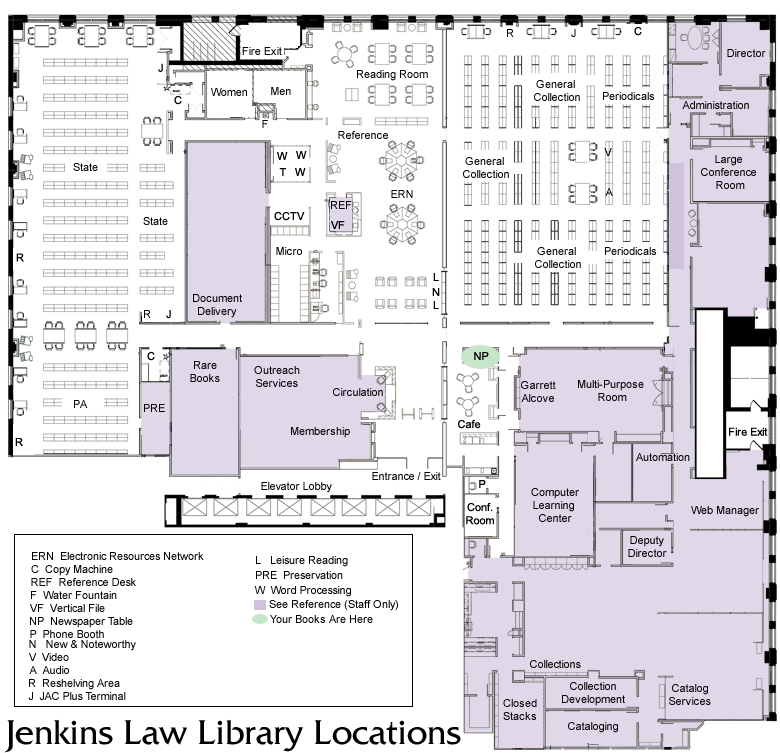
<style>
.page{position:relative;width:780px;height:753px;background:#ffffff}
.page>*{position:absolute;margin:0}
.t1{font:11px "ArialMT";color:#000000}
.t2{font:36px "FrizQuadrata";color:#000000}
</style>
<div class="page">
<p class="t1" style="left:507px;top:29px;width:7px;height:8px">R</p>
<p class="t1" style="left:571px;top:29px;width:5px;height:8px">J</p>
<p class="t1" style="left:634px;top:26px;width:8px;height:10px">C</p>
<p class="t1" style="left:242px;top:47px;width:40px;height:8px">Fire Exit</p>
<p class="t1" style="left:727px;top:49px;width:39px;height:8px">Director</p>
<p class="t1" style="left:158px;top:63px;width:5px;height:9px">J</p>
<p class="t1" style="left:357px;top:70px;width:71px;height:11px">Reading Room</p>
<p class="t1" style="left:211px;top:88px;width:36px;height:8px">Women</p>
<p class="t1" style="left:271px;top:87px;width:20px;height:8px">Men</p>
<p class="t1" style="left:534px;top:80px;width:46px;height:21px;text-align:center">General <br>Collection</p>
<p class="t1" style="left:174px;top:95px;width:8px;height:10px">C</p>
<p class="t1" style="left:603px;top:92px;width:51px;height:8px">Periodicals</p>
<p class="t1" style="left:682px;top:101px;width:67px;height:8px">Administration</p>
<p class="t1" style="left:262px;top:120px;width:6px;height:8px">F</p>
<p class="t1" style="left:338px;top:131px;width:50px;height:8px">Reference</p>
<p class="t1" style="left:604px;top:148px;width:8px;height:8px">V</p>
<p class="t1" style="left:277px;top:152px;width:11px;height:8px">W</p>
<p class="t1" style="left:296px;top:151px;width:11px;height:8px">W</p>
<p class="t1" style="left:463px;top:157px;width:46px;height:21px;text-align:center">General <br>Collection</p>
<p class="t1" style="left:701px;top:155px;width:55px;height:34px;text-align:center">Large <br>Conference <br>Room</p>
<p class="t1" style="left:73px;top:163px;width:25px;height:8px">State</p>
<p class="t1" style="left:279px;top:168px;width:7px;height:8px">T</p>
<p class="t1" style="left:295px;top:168px;width:11px;height:8px">W</p>
<p class="t1" style="left:391px;top:190px;width:22px;height:8px">ERN</p>
<p class="t1" style="left:605px;top:188px;width:8px;height:8px">A</p>
<p class="t1" style="left:331px;top:201px;width:21px;height:8px">REF</p>
<p class="t1" style="left:143px;top:217px;width:25px;height:8px">State</p>
<p class="t1" style="left:274px;top:211px;width:31px;height:10px">CCTV</p>
<p class="t1" style="left:331px;top:221px;width:14px;height:8px">VF</p>
<p class="t1" style="left:16px;top:253px;width:8px;height:9px">R</p>
<p class="t1" style="left:276px;top:247px;width:26px;height:8px">Micro</p>
<p class="t1" style="left:535px;top:247px;width:46px;height:21px;text-align:center">General <br>Collection</p>
<p class="t1" style="left:605px;top:247px;width:51px;height:8px">Periodicals</p>
<p class="t1" style="left:433px;top:273px;width:6px;height:8px">L</p>
<p class="t1" style="left:193px;top:294px;width:49px;height:24px;text-align:center">Document<br>Delivery</p>
<p class="t1" style="left:432px;top:288px;width:8px;height:8px">N</p>
<p class="t1" style="left:433px;top:301px;width:6px;height:8px">L</p>
<p class="t1" style="left:144px;top:310px;width:7px;height:8px">R</p>
<p class="t1" style="left:166px;top:310px;width:5px;height:9px">J</p>
<p class="t1" style="left:147px;top:351px;width:8px;height:10px">C</p>
<p class="t1" style="left:474px;top:352px;width:15px;height:8px">NP</p>
<p class="t1" style="left:190px;top:361px;width:30px;height:21px;text-align:center">Rare<br>Books</p>
<p class="t1" style="left:254px;top:366px;width:46px;height:21px;text-align:center">Outreach<br>Services</p>
<p class="t1" style="left:333px;top:388px;width:50px;height:8px">Circulation</p>
<p class="t1" style="left:521px;top:381px;width:35px;height:21px;text-align:center">Garrett<br>Alcove</p>
<p class="t1" style="left:578px;top:380px;width:66px;height:21px;text-align:center">Multi-Purpose <br>Room</p>
<p class="t1" style="left:74px;top:400px;width:14px;height:8px">PA</p>
<p class="t1" style="left:144px;top:404px;width:21px;height:8px">PRE</p>
<p class="t1" style="left:458px;top:419px;width:23px;height:10px">Cafe</p>
<p class="t1" style="left:15px;top:438px;width:8px;height:8px">R</p>
<p class="t1" style="left:291px;top:427px;width:59px;height:11px">Membership</p>
<p class="t1" style="left:729px;top:427px;width:39px;height:9px">Fire Exit</p>
<p class="t1" style="left:636px;top:453px;width:54px;height:8px">Automation</p>
<p class="t1" style="left:372px;top:472px;width:69px;height:8px">Entrance / Exit</p>
<p class="t1" style="left:261px;top:482px;width:71px;height:11px">Elevator Lobby</p>
<p class="t1" style="left:479px;top:480px;width:7px;height:8px">P</p>
<p class="t1" style="left:531px;top:488px;width:48px;height:34px;text-align:center">Computer<br>Learning <br>Center</p>
<p class="t1" style="left:466px;top:502px;width:28px;height:23px;text-align:center">Conf.<br>Room</p>
<p class="t1" style="left:691px;top:506px;width:68px;height:11px">Web Manager</p>
<p class="t1" style="left:628px;top:536px;width:39px;height:21px;text-align:center">Deputy<br>Director</p>
<p class="t1" style="left:32px;top:552px;width:172px;height:8px">ERN  Electronic Resources Network</p>
<p class="t1" style="left:256px;top:556px;width:92px;height:11px">L   Leisure Reading</p>
<p class="t1" style="left:31px;top:565px;width:82px;height:11px">C  Copy Machine</p>
<p class="t1" style="left:31px;top:578px;width:105px;height:8px">REF  Reference Desk</p>
<p class="t1" style="left:256px;top:571px;width:87px;height:8px">PRE  Preservation</p>
<p class="t1" style="left:31px;top:591px;width:86px;height:8px">F  Water Fountain</p>
<p class="t1" style="left:254px;top:586px;width:97px;height:11px">W  Word Processing</p>
<p class="t1" style="left:30px;top:604px;width:75px;height:8px">VF  Vertical File</p>
<p class="t1" style="left:269px;top:600px;width:129px;height:11px">See Reference (Staff Only)</p>
<p class="t1" style="left:30px;top:617px;width:103px;height:11px">NP  Newspaper Table</p>
<p class="t1" style="left:270px;top:615px;width:103px;height:8px">Your Books Are Here</p>
<p class="t1" style="left:30px;top:630px;width:74px;height:8px">P  Phone Booth</p>
<p class="t1" style="left:29px;top:640px;width:107px;height:11px">N   New &amp; Noteworthy</p>
<p class="t1" style="left:29px;top:653px;width:40px;height:8px">V  Video</p>
<p class="t1" style="left:530px;top:660px;width:51px;height:8px">Collections</p>
<p class="t1" style="left:29px;top:666px;width:40px;height:8px">A  Audio</p>
<p class="t1" style="left:29px;top:679px;width:91px;height:11px">R  Reshelving Area</p>
<p class="t1" style="left:562px;top:682px;width:63px;height:24px;text-align:center">Collection<br>Development</p>
<p class="t1" style="left:669px;top:684px;width:42px;height:21px;text-align:center">Catalog<br>Services</p>
<p class="t1" style="left:28px;top:692px;width:98px;height:8px">J  JAC Plus Terminal</p>
<p class="t1" style="left:503px;top:699px;width:34px;height:21px;text-align:center">Closed<br>Stacks</p>
<p class="t2" style="left:4px;top:719px;width:457px;height:34px">Jenkins Law Library Locations</p>
<p class="t1" style="left:568px;top:722px;width:50px;height:11px">Cataloging</p>
</div>
